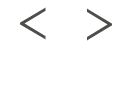
<style>
.page{position:relative;width:132px;height:96px;background:#ffffff}
.page>*{position:absolute;margin:0}
.t1{font:59.9px "Raleway-Light";color:#4e4d49;text-transform:uppercase}
.t2{font:60px "Raleway-Light";color:#4e4d49;text-transform:uppercase}
</style>
<div class="page">
<p class="t1" style="left:20px;top:7px;width:26px;height:33px">&lt;</p>
<p class="t2" style="left:87px;top:8px;width:25px;height:33px;rotate:180deg">&lt;</p>
</div>
